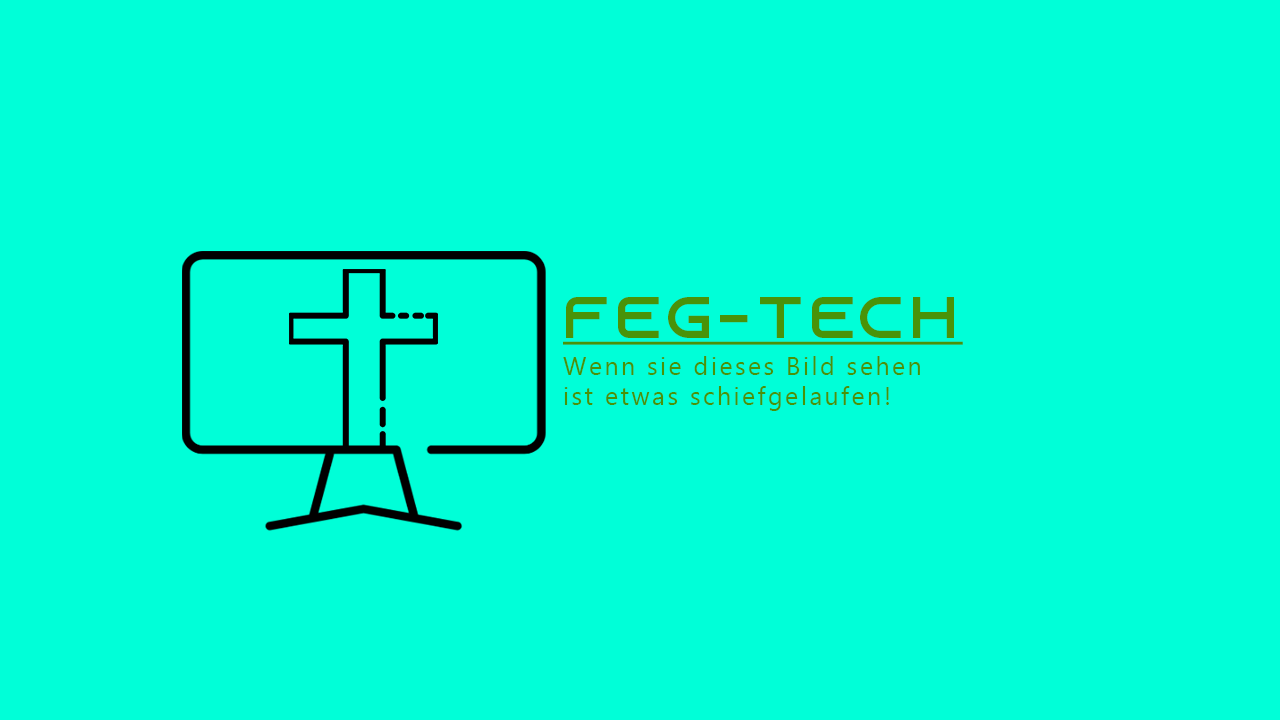
<style>
.page{position:relative;width:1280px;height:720px;background:#00ffd8}
.page>*{position:absolute;margin:0}
.t1{font:58.3px "AzonixRegular";letter-spacing:0.1em;color:#499308;text-decoration:underline}
.t2{font:25px "Gadugi";letter-spacing:0.1em;color:#499308}
</style>
<div class="page">
<p class="t1" style="left:563px;top:297px;width:400px;height:48px">FEG-Tech</p>
<p class="t2" style="left:563px;top:356px;width:357px;height:55px">Wenn sie dieses Bild sehen ist etwas schiefgelaufen!</p>
</div>
